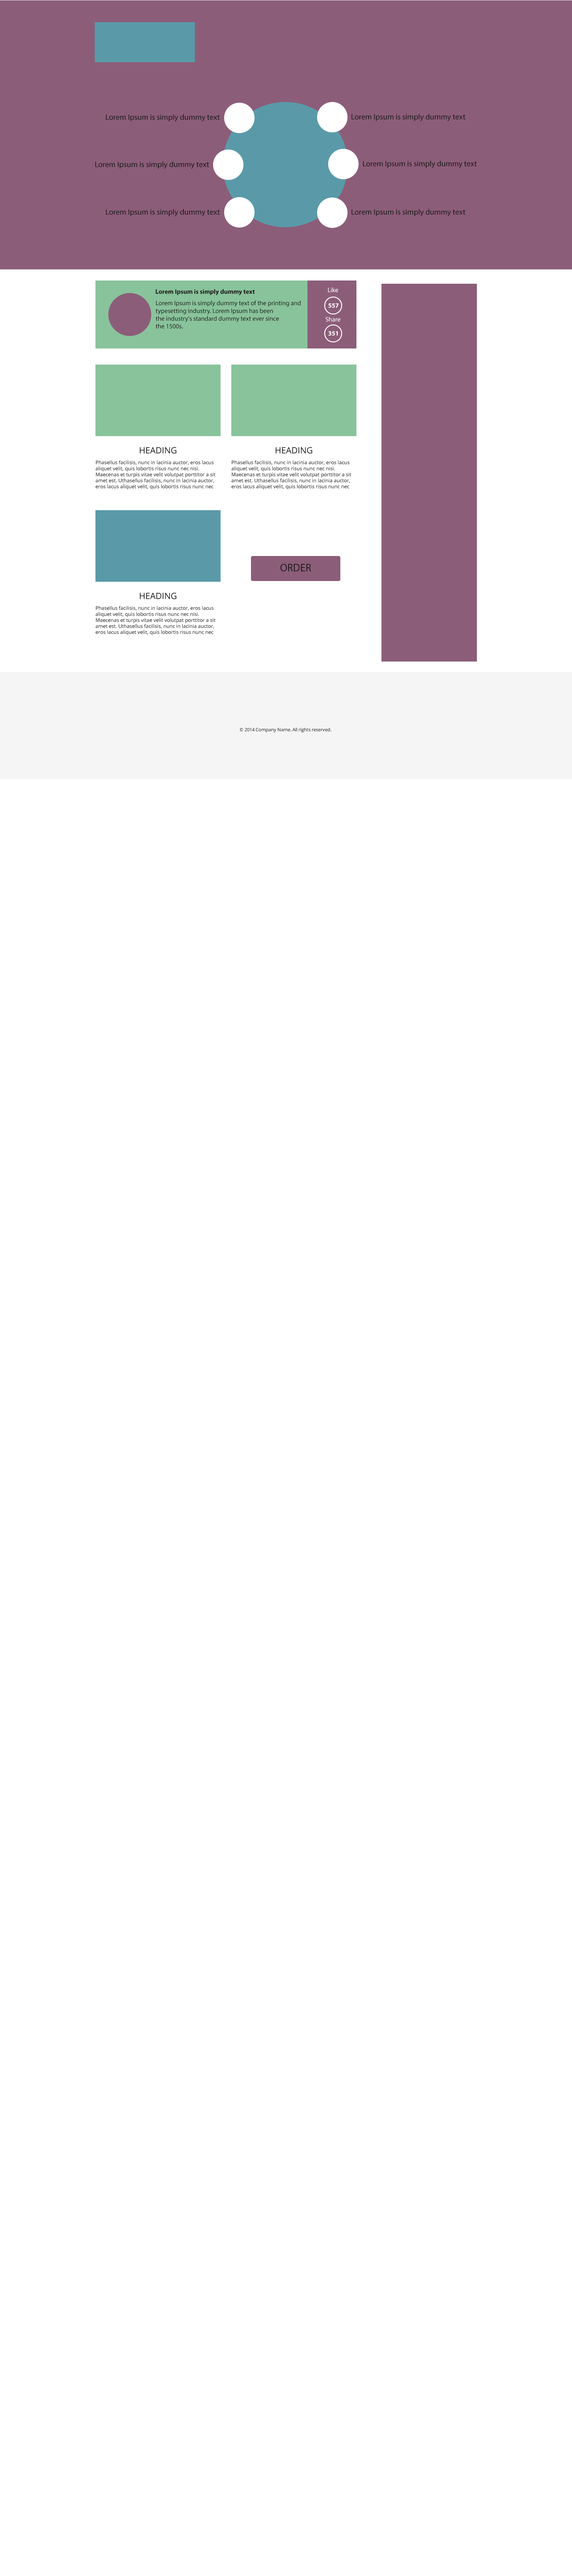
<style>
.page{position:relative;width:572px;height:2576px;background:#ffffff}
.page>*{position:absolute;margin:0}
.t1{font:7.9px "MyriadPro-Regular";color:#1a1a1a}
.t2{font:6.4px "MyriadPro-Bold";color:#1a1a1a}
.t3{font:6.4px "MyriadPro-Regular";color:#ffffff}
.t4{font:6.4px "MyriadPro-Regular";color:#1a1a1a}
.t5{font:6.4px "MyriadPro-Bold";color:#ffffff}
.t6{font:8.6px "OpenSans";color:#1a1a1a;text-transform:uppercase}
.t7{font:5px "OpenSans";color:#1a1a1a}
.t8{font:10.7px "MyriadPro-Regular";color:#1a1a1a;text-transform:uppercase}
.t9{font:4.7px "OpenSans";color:#1a1a1a}
</style>
<div class="page">
<p class="t1" style="left:352px;top:114px;width:114px;height:7px">Lorem Ipsum is simply dummy text</p>
<p class="t1" style="left:106px;top:114px;width:114px;height:8px">Lorem Ipsum is simply dummy text</p>
<p class="t1" style="left:95px;top:161px;width:114px;height:8px">Lorem Ipsum is simply dummy text</p>
<p class="t1" style="left:363px;top:161px;width:114px;height:7px">Lorem Ipsum is simply dummy text</p>
<p class="t1" style="left:106px;top:209px;width:114px;height:7px">Lorem Ipsum is simply dummy text</p>
<p class="t1" style="left:352px;top:209px;width:114px;height:7px">Lorem Ipsum is simply dummy text</p>
<p class="t2" style="left:156px;top:289px;width:99px;height:6px">Lorem Ipsum is simply dummy text</p>
<p class="t3" style="left:328px;top:287px;width:10px;height:5px">Like</p>
<p class="t4" style="left:156px;top:301px;width:145px;height:27px">Lorem Ipsum is simply dummy text of the printing and <br>typesetting industry. Lorem Ipsum has been <br>the industry's standard dummy text ever since <br>the 1500s.</p>
<p class="t5" style="left:328px;top:303px;width:11px;height:5px">557</p>
<p class="t3" style="left:326px;top:317px;width:15px;height:5px">Share</p>
<p class="t5" style="left:328px;top:331px;width:10px;height:5px">351</p>
<p class="t6" style="left:140px;top:447px;width:37px;height:7px">Heading</p>
<p class="t6" style="left:276px;top:447px;width:37px;height:7px">Heading</p>
<p class="t7" style="left:96px;top:460px;width:120px;height:29px">Phasellus facilisis, nunc in lacinia auctor, eros lacus aliquet velit, quis lobortis risus nunc nec nisi. Maecenas et turpis vitae velit volutpat porttitor a sit amet est. Uthasellus facilisis, nunc in lacinia auctor, eros lacus aliquet velit, quis lobortis risus nunc nec nisi.</p>
<p class="t7" style="left:231px;top:460px;width:121px;height:29px">Phasellus facilisis, nunc in lacinia auctor, eros lacus aliquet velit, quis lobortis risus nunc nec nisi. Maecenas et turpis vitae velit volutpat porttitor a sit amet est. Uthasellus facilisis, nunc in lacinia auctor, eros lacus aliquet velit, quis lobortis risus nunc nec nisi.</p>
<p class="t8" style="left:280px;top:564px;width:31px;height:7px">order</p>
<p class="t6" style="left:140px;top:592px;width:37px;height:7px">Heading</p>
<p class="t7" style="left:96px;top:606px;width:120px;height:29px">Phasellus facilisis, nunc in lacinia auctor, eros lacus aliquet velit, quis lobortis risus nunc nec nisi. Maecenas et turpis vitae velit volutpat porttitor a sit amet est. Uthasellus facilisis, nunc in lacinia auctor, eros lacus aliquet velit, quis lobortis risus nunc nec nisi.</p>
<p class="t9" style="left:240px;top:728px;width:92px;height:4px">© 2014 Company Name. All rights reserved.</p>
</div>
